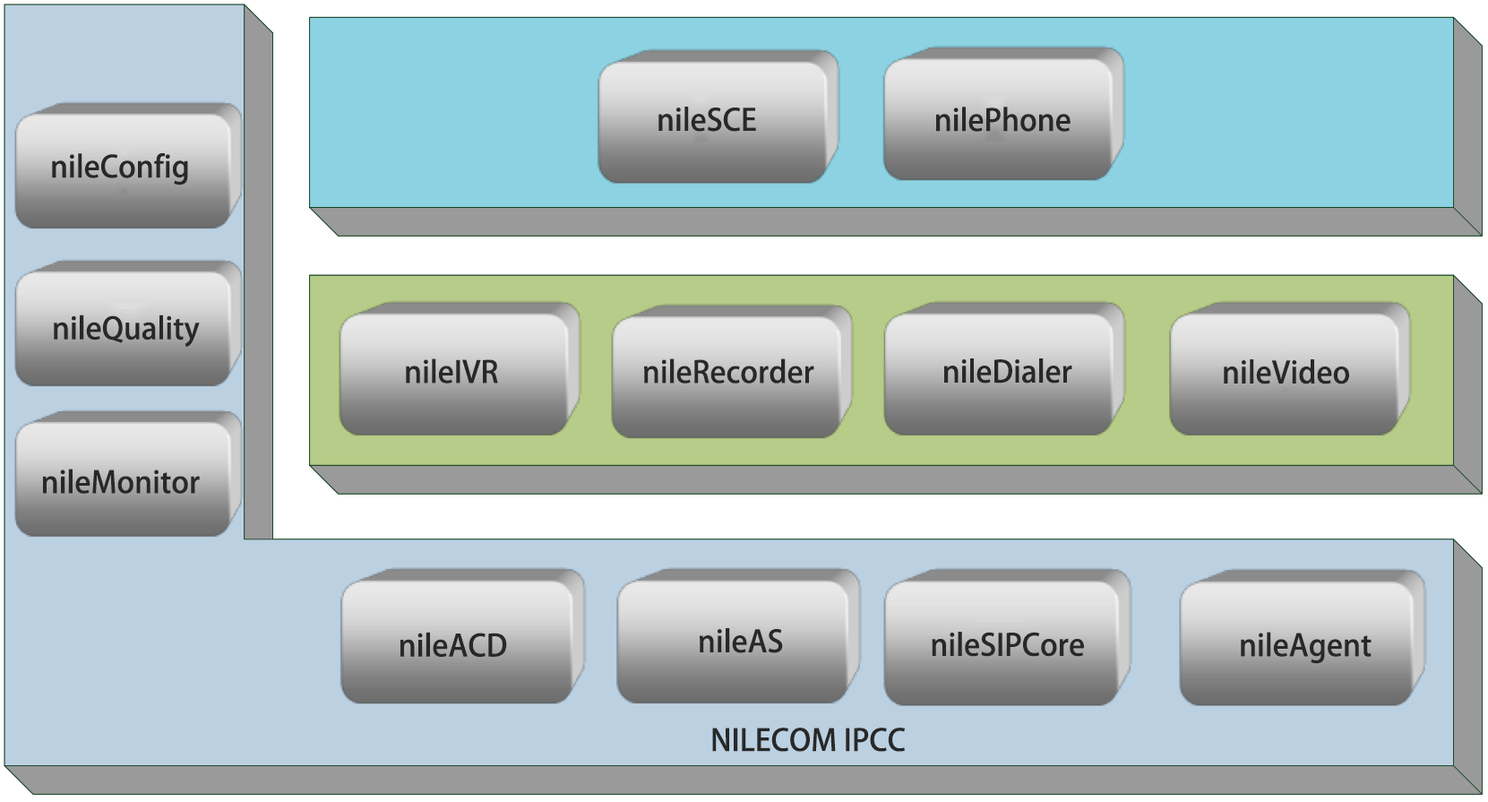
<style>
.page{position:relative;width:1488px;height:802px}
.page>*{position:absolute;margin:0}
.t1{font:29.9px "AdobeHeitiStd-Regular";color:#272828}
</style>
<div class="page">
<p class="t1" style="left:658px;top:107px;width:98px;height:25px">nileSCE</p>
<p class="t1" style="left:936px;top:107px;width:134px;height:25px">nilePhone</p>
<p class="t1" style="left:52px;top:153px;width:136px;height:32px">nileConfig</p>
<p class="t1" style="left:54px;top:314px;width:146px;height:33px">nileQuality</p>
<p class="t1" style="left:406px;top:358px;width:92px;height:25px">nileIVR</p>
<p class="t1" style="left:644px;top:358px;width:170px;height:25px">nileRecorder</p>
<p class="t1" style="left:944px;top:358px;width:128px;height:25px">nileDialer</p>
<p class="t1" style="left:1223px;top:359px;width:126px;height:25px">nileVideo</p>
<p class="t1" style="left:42px;top:468px;width:158px;height:25px">nileMonitor</p>
<p class="t1" style="left:699px;top:628px;width:84px;height:25px">nileAS</p>
<p class="t1" style="left:399px;top:631px;width:108px;height:25px">nileACD</p>
<p class="t1" style="left:931px;top:631px;width:153px;height:25px">nileSIPCore</p>
<p class="t1" style="left:1240px;top:631px;width:131px;height:33px">nileAgent</p>
<p class="t1" style="left:712px;top:727px;width:193px;height:24px">NILECOM IPCC</p>
</div>
